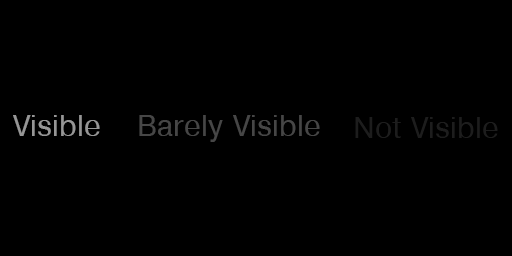
<style>
.page{position:relative;width:512px;height:256px;background:#000000}
.page>*{position:absolute;margin:0}
.t1{font:30px "Helvetica";color:#969696}
.t2{font:30px "Helvetica";color:#464646}
.t3{font:30px "Helvetica";color:#0b0b0b}
</style>
<div class="page">
<p class="t1" style="left:13px;top:115px;width:87px;height:21px">Visible</p>
<p class="t2" style="left:139px;top:115px;width:181px;height:27px">Barely Visible</p>
<p class="t3" style="left:355px;top:117px;width:143px;height:21px">Not Visible</p>
</div>
